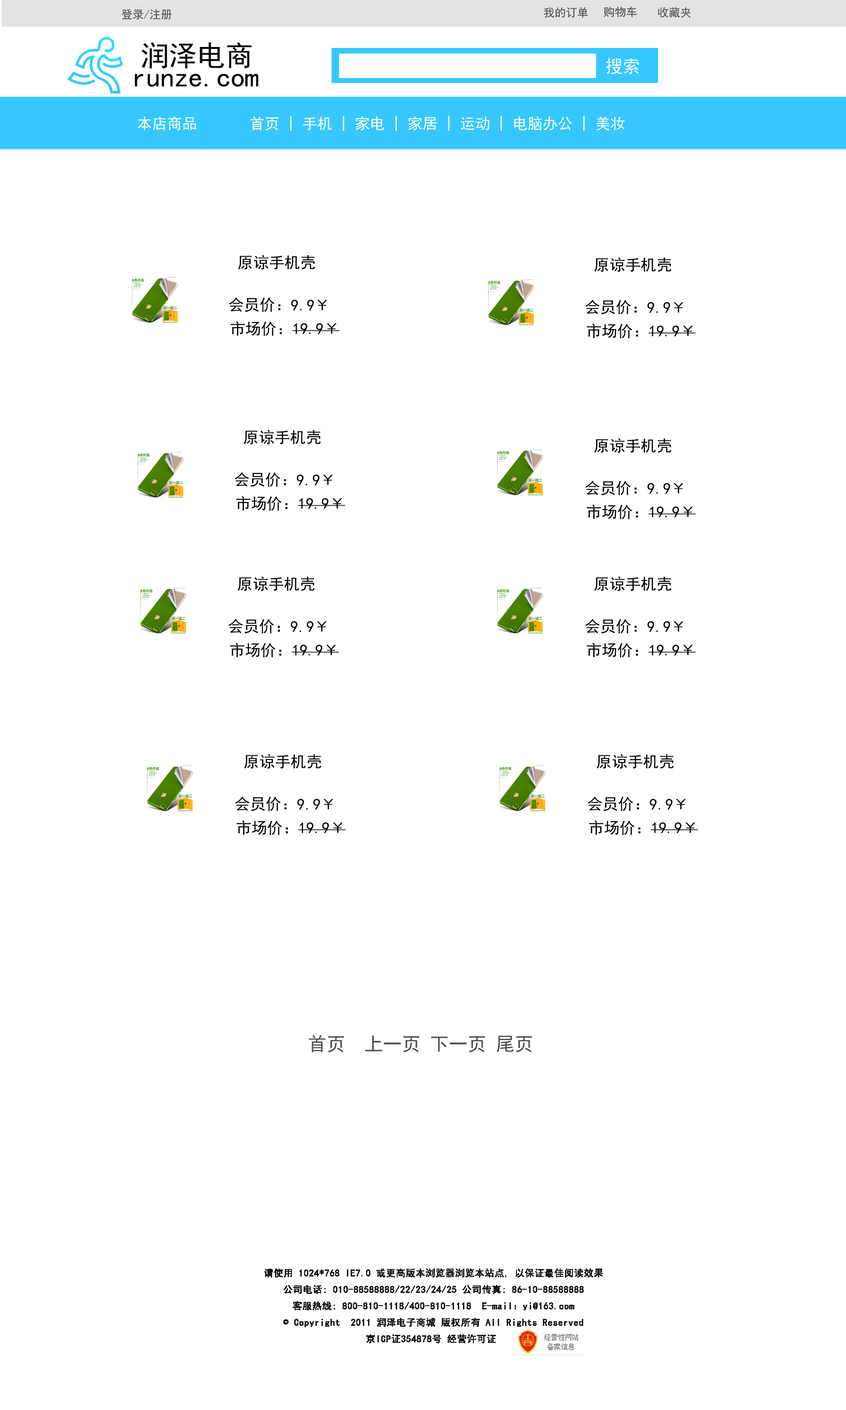
<style>
.page{position:relative;width:846px;height:1410px;background:#ffffff}
.page>*{position:absolute;margin:0}
.t1{font:11.3px "SimHei";color:#4c4c4c}
.t2{font:28.2px "SimHei";color:#010101}
.t3{font:17.5px "SimHei";color:#ffffff}
.t4{font:15px "SimHei";color:#ffffff}
.t5{font:15.7px "SimHei";color:#010101}
.t6{font:18.8px "SimHei";color:#4c4c4c}
.t7{font:9.4px "SimHei";color:#1a1a1a;font-weight:bold}
.t8{font:9.4px "SimSun";color:#1a1a1a;font-weight:bold}
</style>
<div class="page">
<p class="t1" style="left:122px;top:9px;width:50px;height:11px">登录/注册</p>
<p class="t1" style="left:544px;top:7px;width:44px;height:11px">我的订单</p>
<p class="t1" style="left:603px;top:7px;width:34px;height:10px">购物车</p>
<p class="t1" style="left:658px;top:7px;width:33px;height:11px">收藏夹</p>
<p class="t2" style="left:141px;top:42px;width:110px;height:27px">润泽电商</p>
<p class="t3" style="left:606px;top:58px;width:33px;height:16px">搜索</p>
<p class="t2" style="left:135px;top:74px;width:123px;height:13px">runze.com</p>
<p class="t4" style="left:137px;top:116px;width:488px;height:15px">本店商品       首页 | 手机 | 家电 | 家居 | 运动 | 电脑办公 | 美妆</p>
<p class="t5" style="left:238px;top:255px;width:77px;height:15px">原谅手机壳</p>
<p class="t5" style="left:594px;top:257px;width:78px;height:15px">原谅手机壳</p>
<p class="t5" style="left:229px;top:297px;width:52px;height:15px">会员价：</p>
<p class="t5" style="left:291px;top:299px;width:36px;height:12px">9.9￥</p>
<p class="t5" style="left:585px;top:299px;width:52px;height:15px">会员价：</p>
<p class="t5" style="left:647px;top:302px;width:36px;height:11px">9.9￥</p>
<p class="t5" style="left:230px;top:321px;width:109px;height:15px">市场价：19.9￥</p>
<p class="t5" style="left:586px;top:323px;width:109px;height:15px">市场价：19.9￥</p>
<p class="t5" style="left:243px;top:430px;width:78px;height:15px">原谅手机壳</p>
<p class="t5" style="left:594px;top:438px;width:78px;height:15px">原谅手机壳</p>
<p class="t5" style="left:234px;top:472px;width:52px;height:15px">会员价：</p>
<p class="t5" style="left:297px;top:474px;width:36px;height:11px">9.9￥</p>
<p class="t5" style="left:585px;top:480px;width:52px;height:15px">会员价：</p>
<p class="t5" style="left:647px;top:483px;width:36px;height:11px">9.9￥</p>
<p class="t5" style="left:236px;top:496px;width:109px;height:15px">市场价：19.9￥</p>
<p class="t5" style="left:586px;top:504px;width:109px;height:15px">市场价：19.9￥</p>
<p class="t5" style="left:237px;top:576px;width:78px;height:15px">原谅手机壳</p>
<p class="t5" style="left:594px;top:576px;width:78px;height:15px">原谅手机壳</p>
<p class="t5" style="left:228px;top:618px;width:52px;height:15px">会员价：</p>
<p class="t5" style="left:290px;top:621px;width:37px;height:11px">9.9￥</p>
<p class="t5" style="left:585px;top:618px;width:52px;height:15px">会员价：</p>
<p class="t5" style="left:647px;top:621px;width:36px;height:11px">9.9￥</p>
<p class="t5" style="left:230px;top:642px;width:109px;height:15px">市场价：19.9￥</p>
<p class="t5" style="left:586px;top:642px;width:109px;height:15px">市场价：19.9￥</p>
<p class="t5" style="left:244px;top:754px;width:77px;height:15px">原谅手机壳</p>
<p class="t5" style="left:596px;top:754px;width:78px;height:15px">原谅手机壳</p>
<p class="t5" style="left:235px;top:796px;width:52px;height:15px">会员价：</p>
<p class="t5" style="left:587px;top:796px;width:52px;height:15px">会员价：</p>
<p class="t5" style="left:297px;top:798px;width:36px;height:12px">9.9￥</p>
<p class="t5" style="left:649px;top:798px;width:37px;height:12px">9.9￥</p>
<p class="t5" style="left:236px;top:820px;width:109px;height:15px">市场价：19.9￥</p>
<p class="t5" style="left:589px;top:820px;width:109px;height:15px">市场价：19.9￥</p>
<p class="t6" style="left:309px;top:1035px;width:223px;height:17px">首页  上一页 下一页 尾页</p>
<p class="t7" style="left:264px;top:1268px;width:339px;height:75px;text-align:center">请使用 1024*768 IE7.0 或更高版本浏览器浏览本站点, 以保证最佳阅读效果<br>公司电话: 010-88588888/22/23/24/25 公司传真: 86-10-88588888<br>客服热线: 800-810-1118/400-810-1118  E-mail：yi@163.com<br><span class="t8">©</span> Copyright  2011 润泽电子商城 版权所有 All Rights Reserved<br>京ICP证354878号 经营许可证</p>
</div>
